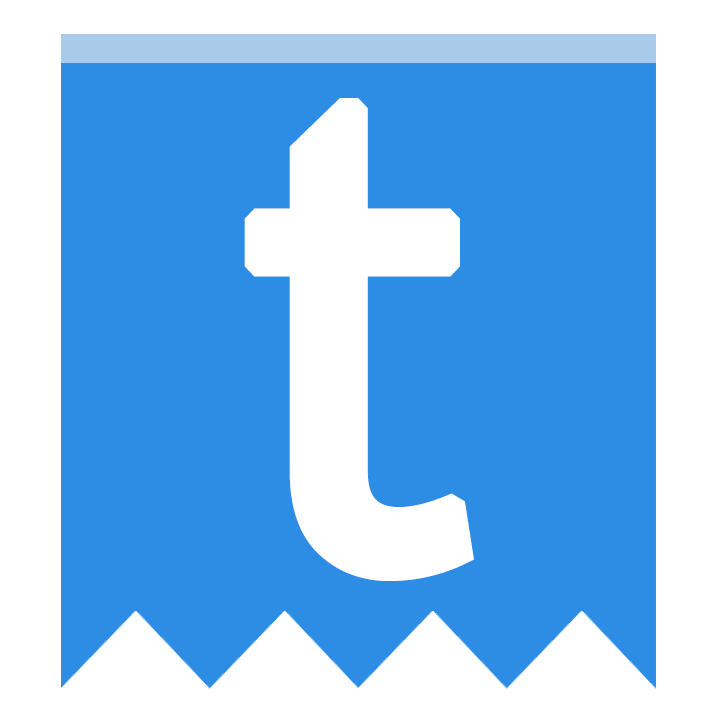
<style>
.page{position:relative;width:719px;height:719px;background:#2d8ce3}
.page>*{position:absolute;margin:0}
.t1{font:751.9px "AverageSans-Regular";color:#ffffff;font-weight:bold;scale:0.95 1}
</style>
<div class="page">
<p class="t1" style="left:244px;top:98px;width:230px;height:483px">t</p>
</div>
